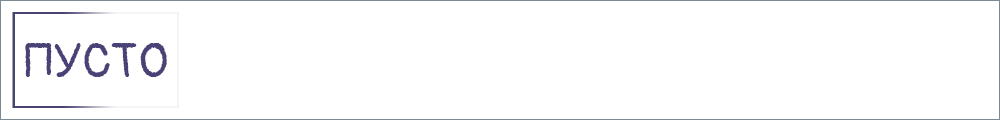
<style>
.page{position:relative;width:1000px;height:120px;background:#ffffff}
.page>*{position:absolute;margin:0}
.t1{font:48px "Pangolin-Regular";color:#494276;text-transform:uppercase}
</style>
<div class="page">
<p class="t1" style="left:25px;top:43px;width:142px;height:34px">Пусто</p>
</div>
